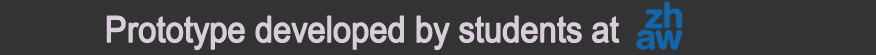
<style>
.page{position:relative;width:876px;height:55px;background:#333333}
.page>*{position:absolute;margin:0}
.t1{font:36px "ArialNarrow";letter-spacing:-0.02em;color:#d8ced9;font-weight:bold;scale:1.1 1}
</style>
<div class="page">
<p class="t1" style="left:106px;top:15px;width:514px;height:36px">Prototype developed by students at</p>
</div>
